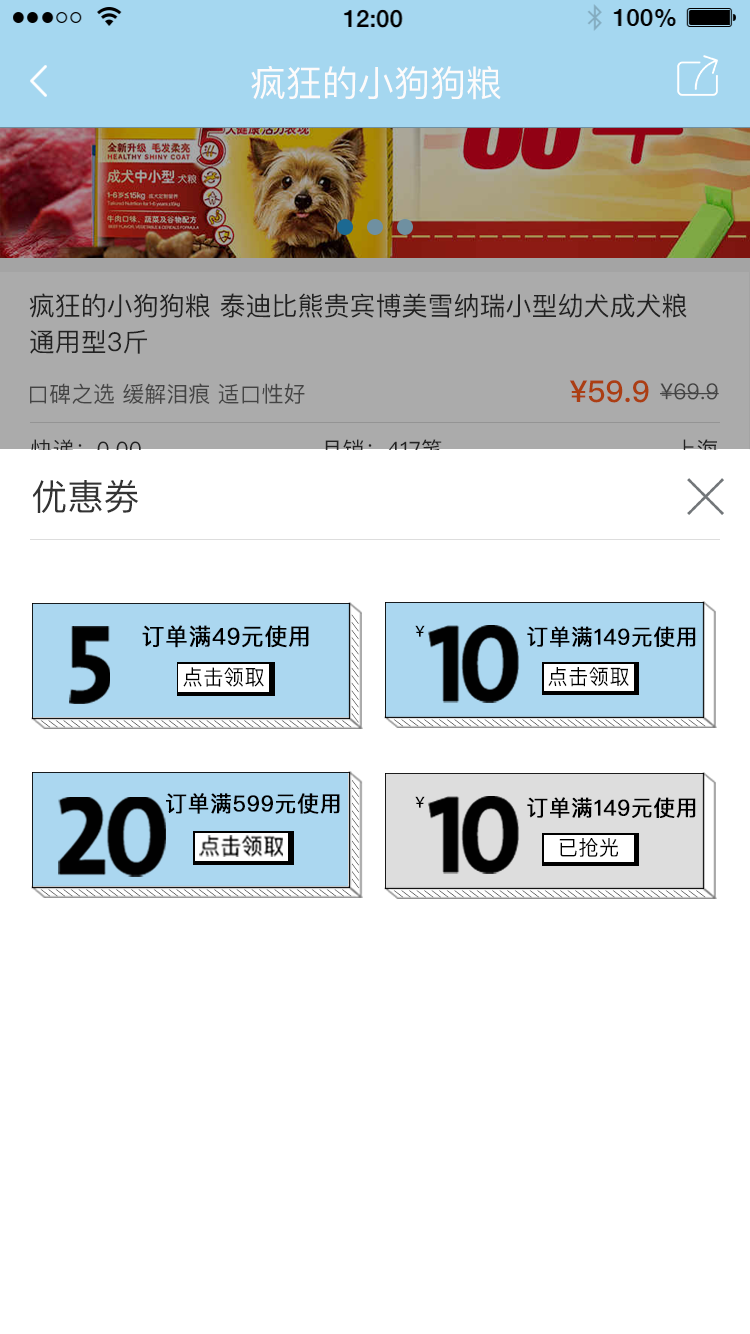
<style>
.page{position:relative;width:750px;height:1334px;background:#ffffff}
.page>*{position:absolute;margin:0}
.t1{font:36px "PingFangSC-Regular";color:#fdfbfb}
.t2{font:26px/36px "PingFangSC-Regular";color:#333333}
.t3{font:22px "PingFangSC-Regular";color:#444444}
.t4{font:30px "PingFangSC-Medium";color:#ab3e13}
.t5{font:22px "PingFangSC-Regular"}
.t6{font:36px "PingFangSC-Regular";color:#333333}
.t7{font:12.9px "ArialMT";letter-spacing:0.27em;text-transform:uppercase;scale:1.08 1}
.t8{font:112.2px "TheSansBold-Caps";letter-spacing:-0.19em;color:#010101;text-transform:uppercase;font-weight:bold;scale:0.96 1}
.t9{font:23.2px "PingFangSC-Regular";letter-spacing:0.03em;color:#000000;text-transform:uppercase;font-weight:bold;scale:0.96 1}
.t10{font:14.6px "AdobeHeitiStd-Regular";letter-spacing:0.03em;color:#000000;text-transform:uppercase}
.t11{font:110.4px "TheSansBold-Caps";letter-spacing:-0.09em;color:#010101;text-transform:uppercase;font-weight:bold;scale:0.97 1}
.t12{font:22px "PingFangSC-Regular";letter-spacing:0.03em;color:#000000;text-transform:uppercase;font-weight:bold;scale:0.96 1}
.t13{font:21.1px "PingFangSC-Regular";letter-spacing:0.03em;color:#000000;text-transform:uppercase;scale:0.95 1}
.t14{font:20.9px "PingFangSC-Regular";letter-spacing:0.03em;color:#000000;text-transform:uppercase;scale:0.96 1}
.t15{font:12.9px "ArialMT";letter-spacing:0.27em;text-transform:uppercase;scale:1.07 1}
.t16{font:114.3px "TheSansBold-Caps";letter-spacing:-0.07em;color:#010101;text-transform:uppercase;font-weight:bold}
.t17{font:22px "PingFangSC-Regular";letter-spacing:0.03em;color:#000000;text-transform:uppercase;font-weight:bold;scale:0.97 1}
.t18{font:21.6px "PingFang-SC-Medium";letter-spacing:0.03em;color:#000000;text-transform:uppercase;scale:0.96 1}
</style>
<div class="page">
<p class="t1" style="left:251px;top:66px;width:250px;height:34px">疯狂的小狗狗粮</p>
<p class="t2" style="left:29px;top:293px;width:658px;height:61px">疯狂的小狗狗粮 泰迪比熊贵宾博美雪纳瑞小型幼犬成犬粮<br>通用型3斤</p>
<p class="t3" style="left:30px;top:383px;width:275px;height:22px">口碑之选 缓解泪痕 适口性好</p>
<p class="t4" style="left:569px;top:380px;width:80px;height:23px">¥59.9</p>
<p class="t3" style="left:660px;top:383px;width:59px;height:17px">¥69.9</p>
<p class="t5" style="left:31px;top:439px;width:110px;height:21px">快递：0.00</p>
<p class="t5" style="left:323px;top:439px;width:119px;height:21px">月销：417笔</p>
<p class="t6" style="left:32px;top:479px;width:107px;height:34px">优惠劵</p>
<p class="t7" style="left:351px;top:614px;width:8px;height:109px;rotate:90deg">//////////////</p>
<p class="t8" style="left:69px;top:626px;width:41px;height:78px">5</p>
<p class="t9" style="left:142px;top:625px;width:167px;height:23px">订单满49元使用</p>
<p class="t10" style="left:415px;top:625px;width:10px;height:12px">￥</p>
<p class="t11" style="left:428px;top:625px;width:91px;height:78px">10</p>
<p class="t12" style="left:527px;top:626px;width:169px;height:21px">订单满149元使用</p>
<p class="t13" style="left:183px;top:667px;width:81px;height:20px">点击领取</p>
<p class="t14" style="left:548px;top:667px;width:81px;height:20px">点击领取</p>
<p class="t15" style="left:40px;top:720px;width:312px;height:8px;rotate:180deg">/////////////////////////////////////////</p>
<p class="t15" style="left:393px;top:719px;width:313px;height:8px;rotate:180deg">/////////////////////////////////////////</p>
<p class="t7" style="left:352px;top:780px;width:7px;height:109px;rotate:90deg">//////////////</p>
<p class="t16" style="left:58px;top:797px;width:108px;height:80px">20</p>
<p class="t17" style="left:166px;top:793px;width:174px;height:21px">订单满599元使用</p>
<p class="t10" style="left:415px;top:796px;width:10px;height:12px">￥</p>
<p class="t11" style="left:428px;top:796px;width:91px;height:78px">10</p>
<p class="t12" style="left:527px;top:797px;width:169px;height:21px">订单满149元使用</p>
<p class="t18" style="left:199px;top:835px;width:84px;height:22px">点击领取</p>
<p class="t14" style="left:559px;top:838px;width:59px;height:19px">已抢光</p>
<p class="t15" style="left:40px;top:889px;width:312px;height:8px;rotate:180deg">/////////////////////////////////////////</p>
<p class="t15" style="left:393px;top:890px;width:313px;height:8px;rotate:180deg">/////////////////////////////////////////</p>
</div>
